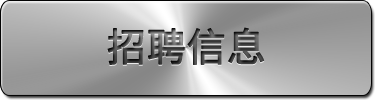
<style>
.page{position:relative;width:375px;height:100px}
.page>*{position:absolute;margin:0}
.t1{font:38.9px "SourceHanSansCN-Regular";font-weight:bold}
</style>
<div class="page">
<p class="t1" style="left:107px;top:27px;width:158px;height:38px">招聘信息</p>
</div>
